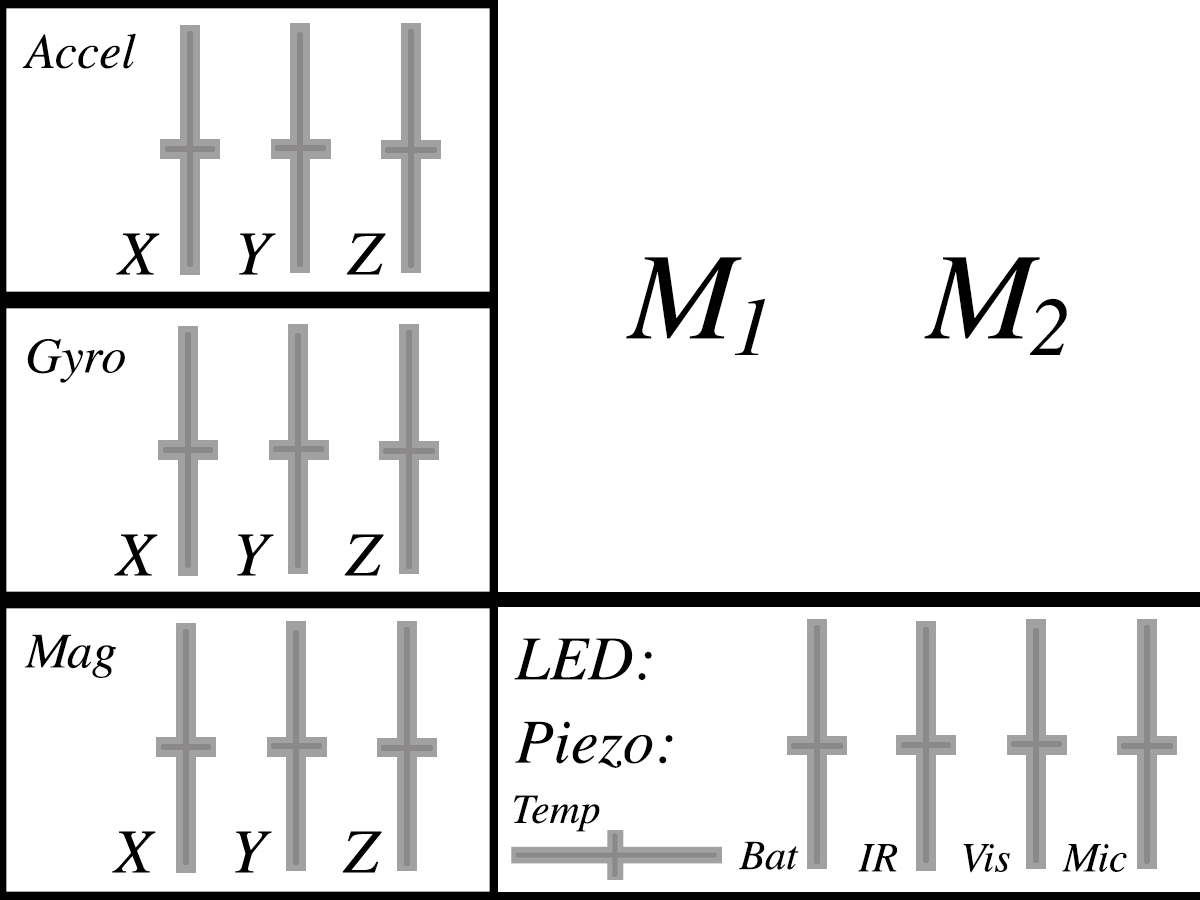
<style>
.page{position:relative;width:1200px;height:900px;background:#ffffff}
.page>*{position:absolute;margin:0}
.t1{font:50px "Times-Italic";color:#000000}
.t2{font:124.2px "Times-Italic";color:#000000}
.t3{font:82.8px "Times-Italic";color:#000000}
.t4{font:62.5px/83.3px "Times-Italic";color:#000000}
.t5{font:41.7px "Times-Italic";color:#000000}
</style>
<div class="page">
<p class="t1" style="left:22px;top:33px;width:114px;height:36px">Accel</p>
<p class="t2" style="left:626px;top:257px;width:139px;height:98px">M<span class="t3">1</span></p>
<p class="t2" style="left:924px;top:257px;width:143px;height:98px">M<span class="t3">2</span></p>
<p class="t1" style="left:27px;top:339px;width:98px;height:44px">Gyro</p>
<p class="t1" style="left:24px;top:634px;width:92px;height:44px">Mag</p>
<p class="t4" style="left:514px;top:638px;width:159px;height:130px">LED:<br>Piezo:</p>
<p class="t5" style="left:514px;top:795px;width:86px;height:37px">Temp</p>
<p class="t5" style="left:739px;top:841px;width:60px;height:29px">Bat</p>
<p class="t5" style="left:858px;top:844px;width:269px;height:29px">IR      Vis     Mic</p>
</div>
